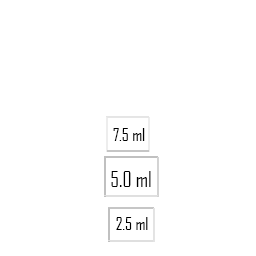
<style>
.page{position:relative;width:256px;height:256px;background:#ffffff}
.page>*{position:absolute;margin:0}
.t1{font:17px "AgencyFB-Reg";color:#000000}
.t2{font:21px "AgencyFB-Reg";color:#000000}
</style>
<div class="page">
<p class="t1" style="left:113px;top:128px;width:32px;height:13px">7.5 ml</p>
<p class="t2" style="left:111px;top:171px;width:40px;height:16px">5.0 ml</p>
<p class="t1" style="left:116px;top:217px;width:32px;height:13px">2.5 ml</p>
</div>
